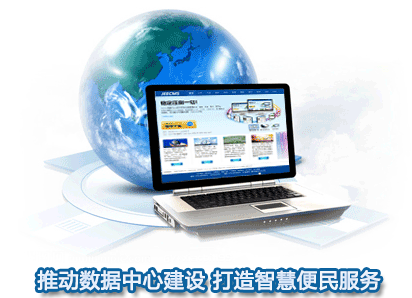
<style>
.page{position:relative;width:412px;height:298px;background:#ffffff}
.page>*{position:absolute;margin:0}
.t1{font:20px "MicrosoftYaHei";letter-spacing:0.025em;color:#ecf3fb;font-weight:bold}
</style>
<div class="page">
<p class="t1" style="left:37px;top:270px;width:344px;height:21px">推动数据中心建设 打造智慧便民服务</p>
</div>
